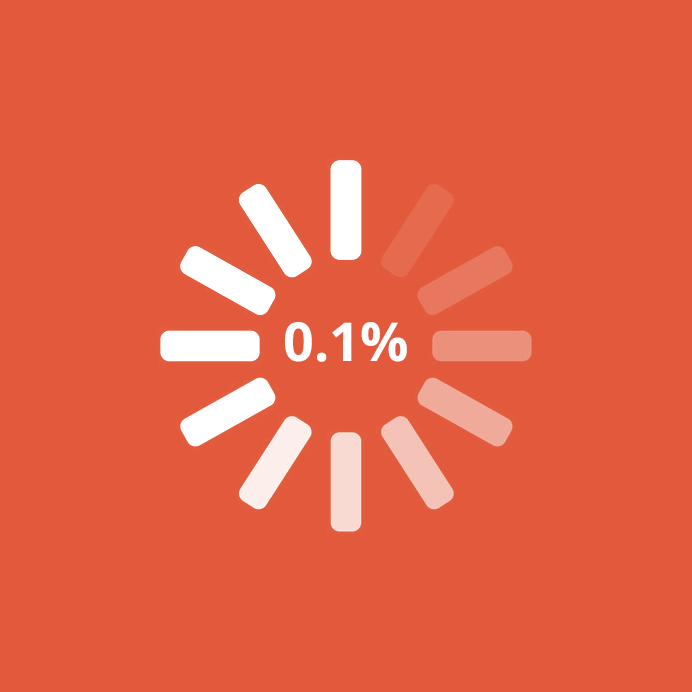
<style>
.page{position:relative;width:692px;height:692px;background:#e25a3b}
.page>*{position:absolute;margin:0}
.t1{font:53.7px "OpenSans-Bold";color:#ffffff}
</style>
<div class="page">
<p class="t1" style="left:285px;top:322px;width:122px;height:40px">0.1%</p>
</div>
